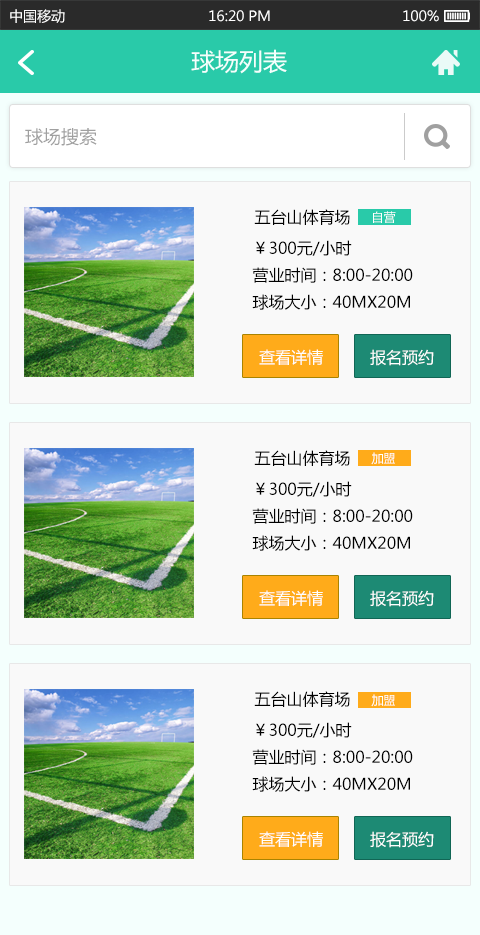
<style>
.page{position:relative;width:480px;height:935px;background:#f9f9f9}
.page>*{position:absolute;margin:0}
.t1{font:14px "MicrosoftYaHei";color:#ffffff}
.t2{font:24px "MicrosoftYaHei";color:#f4fffd}
.t3{font:18px "MicrosoftYaHei";color:#a0a0a0}
.t4{font:16px "MicrosoftYaHei";color:#000000}
.t5{font:12px "MicrosoftYaHei";color:#ffffff}
.t6{font:16px "MicrosoftYaHei";color:#ffffff}
</style>
<div class="page">
<p class="t1" style="left:10px;top:9px;width:55px;height:14px">中国移动</p>
<p class="t1" style="left:209px;top:10px;width:61px;height:12px">16:20 PM</p>
<p class="t1" style="left:403px;top:10px;width:36px;height:12px">100%</p>
<p class="t2" style="left:191px;top:49px;width:96px;height:25px">球场列表</p>
<p class="t3" style="left:25px;top:128px;width:72px;height:18px">球场搜索</p>
<p class="t4" style="left:254px;top:209px;width:96px;height:16px">五台山体育场</p>
<p class="t5" style="left:373px;top:211px;width:23px;height:12px">自营</p>
<p class="t4" style="left:256px;top:240px;width:96px;height:16px">￥300元/小时</p>
<p class="t4" style="left:252px;top:267px;width:161px;height:16px">营业时间：8:00-20:00</p>
<p class="t4" style="left:252px;top:294px;width:158px;height:16px">球场大小：40MX20M</p>
<p class="t6" style="left:259px;top:349px;width:64px;height:16px">查看详情</p>
<p class="t6" style="left:370px;top:349px;width:64px;height:17px">报名预约</p>
<p class="t4" style="left:254px;top:450px;width:96px;height:16px">五台山体育场</p>
<p class="t5" style="left:371px;top:452px;width:24px;height:13px">加盟</p>
<p class="t4" style="left:256px;top:481px;width:96px;height:16px">￥300元/小时</p>
<p class="t4" style="left:252px;top:508px;width:161px;height:16px">营业时间：8:00-20:00</p>
<p class="t4" style="left:252px;top:535px;width:158px;height:16px">球场大小：40MX20M</p>
<p class="t6" style="left:259px;top:590px;width:64px;height:16px">查看详情</p>
<p class="t6" style="left:370px;top:590px;width:64px;height:17px">报名预约</p>
<p class="t4" style="left:254px;top:691px;width:96px;height:16px">五台山体育场</p>
<p class="t5" style="left:371px;top:694px;width:24px;height:13px">加盟</p>
<p class="t4" style="left:256px;top:722px;width:96px;height:16px">￥300元/小时</p>
<p class="t4" style="left:252px;top:749px;width:161px;height:16px">营业时间：8:00-20:00</p>
<p class="t4" style="left:252px;top:776px;width:158px;height:16px">球场大小：40MX20M</p>
<p class="t6" style="left:259px;top:831px;width:64px;height:16px">查看详情</p>
<p class="t6" style="left:370px;top:831px;width:64px;height:17px">报名预约</p>
</div>
